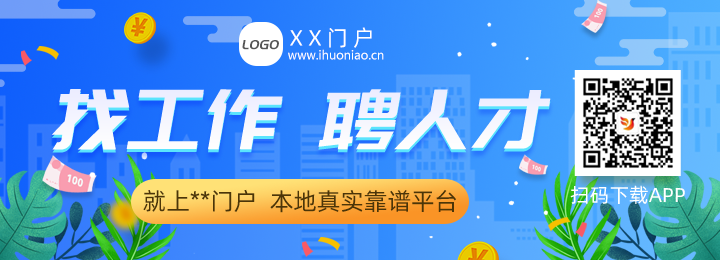
<style>
.page{position:relative;width:720px;height:260px}
.page>*{position:absolute;margin:0}
.t1{font:22px "AlibabaPuHuiTi-Regular";letter-spacing:0.24em;color:#ffffff}
.t2{font:14px "PangMenZhengDao";color:#555555;text-transform:uppercase;font-style:italic}
.t3{font:12px "MicrosoftYaHei";color:#ffffff}
.t4{font:83px "PangMenZhengDao";color:#ffffff;font-style:italic}
.t5{font:83px "PangMenZhengDao";color:#f2f3fe;font-style:italic}
.t6{font:20px "AlibabaPuHuiTiR";color:#ffffff}
.t7{font:24px "AlibabaPuHuiTi-Regular";color:#4b3508}
</style>
<div class="page">
<p class="t1" style="left:290px;top:27px;width:82px;height:21px">XX门户</p>
<p class="t2" style="left:242px;top:40px;width:37px;height:10px">logo</p>
<p class="t3" style="left:288px;top:49px;width:96px;height:11px">www.ihuoniao.cn</p>
<p class="t4" style="left:51px;top:89px;width:500px;height:61px">找工作 聘人才</p>
<p class="t5" style="left:51px;top:92px;width:500px;height:61px">找工作 聘人才</p>
<p class="t6" style="left:570px;top:185px;width:115px;height:19px">扫码下载APP</p>
<p class="t7" style="left:143px;top:189px;width:313px;height:24px">就上**门户  本地真实靠谱平台</p>
</div>
